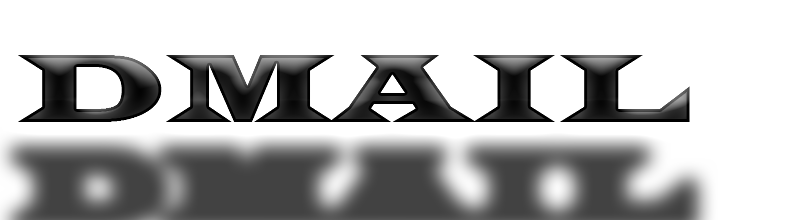
<style>
.page{position:relative;width:800px;height:220px;background:#ffffff}
.page>*{position:absolute;margin:0}
.t1{font:100px "LatinWide";color:#000000}
</style>
<div class="page">
<p class="t1" style="left:18px;top:55px;width:672px;height:67px">DMAIL</p>
</div>
